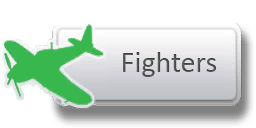
<style>
.page{position:relative;width:256px;height:128px;background:#ffffff}
.page>*{position:absolute;margin:0}
.t1{font:30px "Calibri";color:#636563}
</style>
<div class="page">
<p class="t1" style="left:123px;top:52px;width:93px;height:25px">Fighters</p>
</div>
